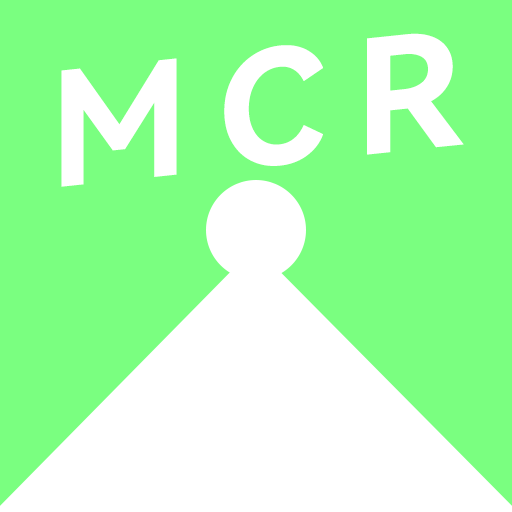
<style>
.page{position:relative;width:512px;height:512px;background:#7aff80}
.page>*{position:absolute;margin:0}
.t1{font:158.4px "HarmonyOS_Sans_SC_Bold";letter-spacing:0.185em;color:#ffffff}
</style>
<div class="page">
<p class="t1" style="left:61px;top:33px;width:403px;height:154px;rotate:-6deg">MCR</p>
</div>
